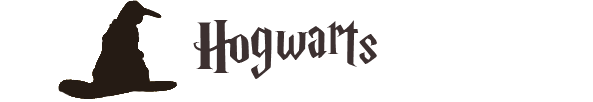
<style>
.page{position:relative;width:593px;height:102px;background:#ffffff}
.page>*{position:absolute;margin:0}
.t1{font:72px "HarryP";color:#3d3131}
</style>
<div class="page">
<p class="t1" style="left:193px;top:20px;width:184px;height:59px">Hogwarts</p>
</div>
